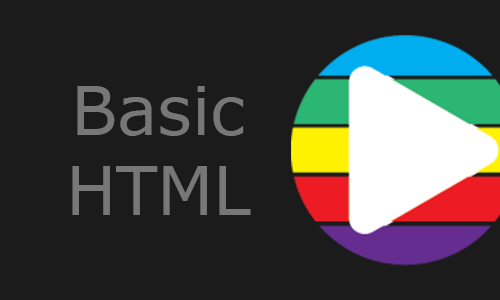
<style>
.page{position:relative;width:500px;height:300px;background:#1b1b1b}
.page>*{position:absolute;margin:0}
.t1{font:66.7px "Verdana";color:#777777}
</style>
<div class="page">
<p class="t1" style="left:72px;top:86px;width:179px;height:129px;text-align:center">Basic<br>HTML</p>
</div>
